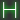
<style>
.page{position:relative;width:20px;height:20px}
.page>*{position:absolute;margin:0}
.t1{font:23px "Gotham-Thin";color:#ffffff}
</style>
<div class="page">
<p class="t1" style="left:3px;top:2px;width:14px;height:16px">H</p>
</div>
